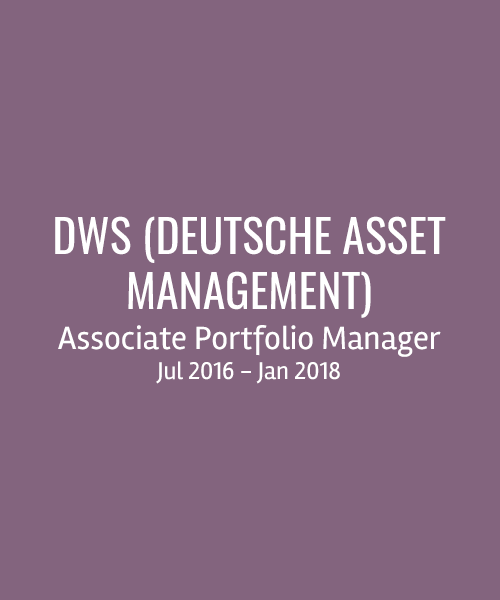
<style>
.page{position:relative;width:500px;height:600px;background:#83647e}
.page>*{position:absolute;margin:0}
.t1{font:45.8px "Oswald-Regular";color:#ffffff}
.t2{font:33.3px "Rambla-Regular";color:#ffffff}
.t3{font:25px "Rambla-Regular";color:#ffffff}
</style>
<div class="page">
<p class="t1" style="left:55px;top:216px;width:391px;height:168px;text-align:center">DWS (DEUTSCHE ASSET<br>MANAGEMENT)<br><span class="t2">Associate Portfolio Manager<br></span><span class="t3">Jul 2016 - Jan 2018</span></p>
</div>
